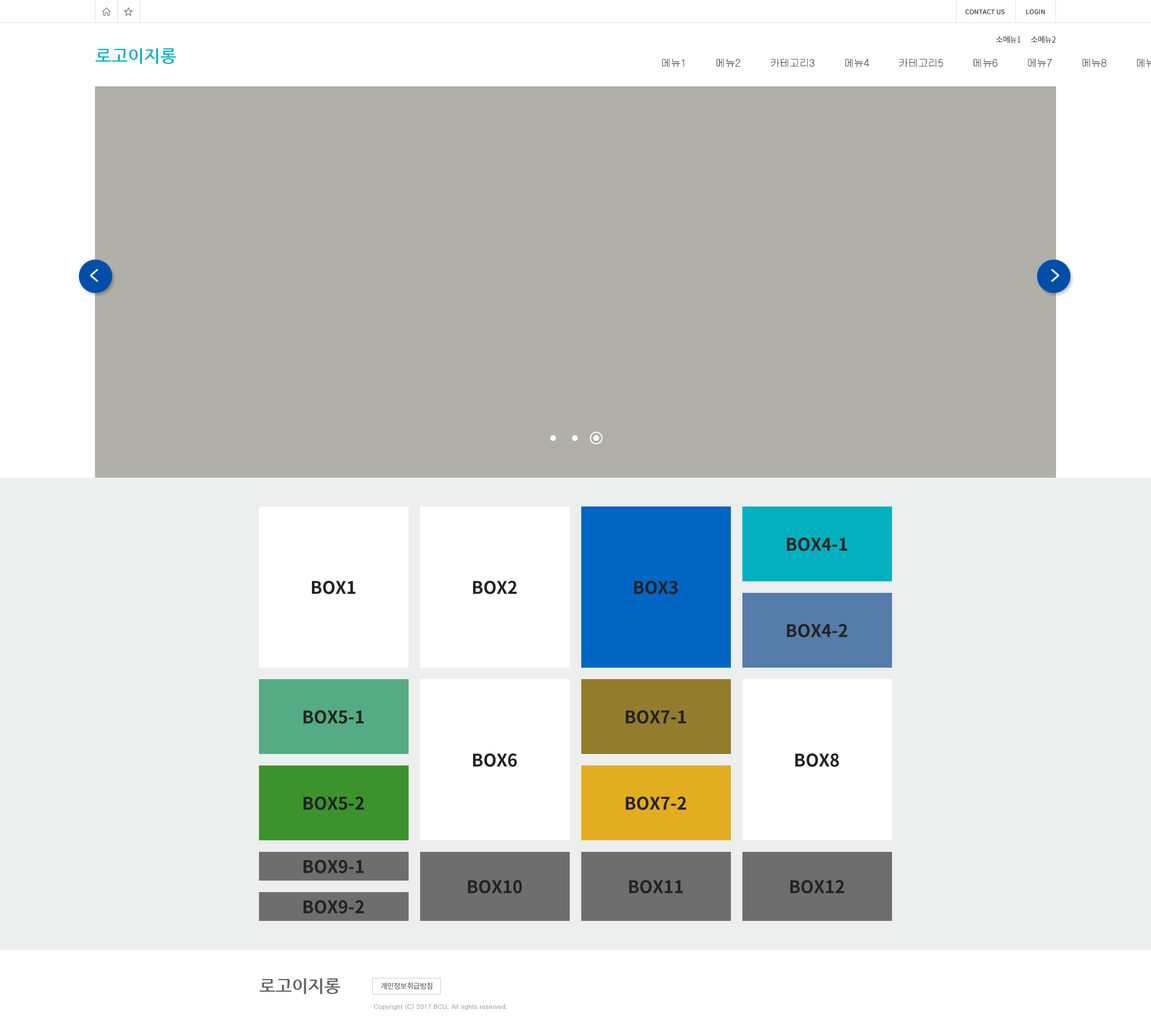
<style>
.page{position:relative;width:1151px;height:1036px;background:#b0b0a8}
.page>*{position:absolute;margin:0}
.t1{font:6.3px "NotoSansKR-Medium";letter-spacing:0.01em;color:#333333;text-transform:uppercase}
.t2{font:8.1px "NotoSansCJKkr-DemiLight";letter-spacing:-0.05em;color:#222222;text-transform:uppercase}
.t3{font:17.3px "NanumGothicBold";color:#03b0bf;text-transform:uppercase}
.t4{font:17.3px "NotoSansCJKkr-Bold";color:#222222;text-transform:uppercase}
.t5{font:7.5px "NotoSansKR-Medium";letter-spacing:-0.045em;color:#666666;text-transform:uppercase}
.t6{font:6.3px "Gulim";letter-spacing:0.01em;color:#666666}
</style>
<div class="page">
<p class="t1" style="left:965px;top:9px;width:80px;height:5px">contact us              login</p>
<p class="t2" style="left:996px;top:36px;width:60px;height:7px">소메뉴1       소메뉴2</p>
<p class="t3" style="left:96px;top:48px;width:80px;height:16px">로고이지롱</p>
<p class="t4" style="left:787px;top:538px;width:60px;height:13px">box4-1</p>
<p class="t4" style="left:312px;top:581px;width:44px;height:14px">box1</p>
<p class="t4" style="left:473px;top:581px;width:44px;height:14px">box2</p>
<p class="t4" style="left:634px;top:581px;width:44px;height:14px">box3</p>
<p class="t4" style="left:787px;top:624px;width:61px;height:14px">box4-2</p>
<p class="t4" style="left:303px;top:710px;width:61px;height:14px">box5-1</p>
<p class="t4" style="left:626px;top:710px;width:60px;height:14px">box7-1</p>
<p class="t4" style="left:473px;top:753px;width:44px;height:14px">box6</p>
<p class="t4" style="left:795px;top:753px;width:44px;height:14px">box8</p>
<p class="t4" style="left:303px;top:797px;width:61px;height:13px">box5-2</p>
<p class="t4" style="left:626px;top:797px;width:61px;height:13px">box7-2</p>
<p class="t4" style="left:303px;top:860px;width:61px;height:14px">box9-1</p>
<p class="t4" style="left:468px;top:880px;width:54px;height:14px">box10</p>
<p class="t4" style="left:629px;top:880px;width:54px;height:14px">box11</p>
<p class="t4" style="left:790px;top:880px;width:54px;height:14px">box12</p>
<p class="t4" style="left:303px;top:900px;width:61px;height:14px">box9-2</p>
<p class="t5" style="left:381px;top:982px;width:51px;height:7px">개인정보취급방침</p>
<p class="t6" style="left:374px;top:1004px;width:133px;height:6px">Copyright (C) 2017 BCU. All rights reserved.</p>
</div>
